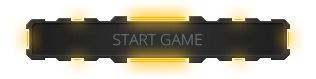
<style>
.page{position:relative;width:316px;height:79px;background:#ffffff}
.page>*{position:absolute;margin:0}
.t1{font:15px "OpenSans-Light";scale:1.04 1}
</style>
<div class="page">
<p class="t1" style="left:113px;top:34px;width:89px;height:12px">START GAME</p>
</div>
